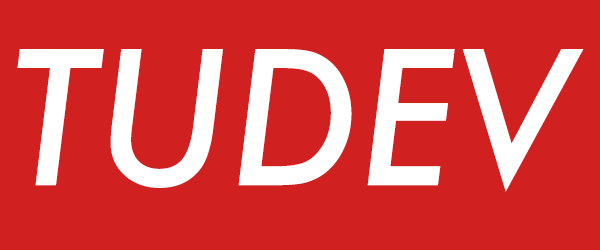
<style>
.page{position:relative;width:600px;height:250px;background:#d02120}
.page>*{position:absolute;margin:0}
.t1{font:180.3px "Futura-MediumItalic";color:#ffffff}
</style>
<div class="page">
<p class="t1" style="left:17px;top:49px;width:567px;height:143px">TUDEV</p>
</div>
